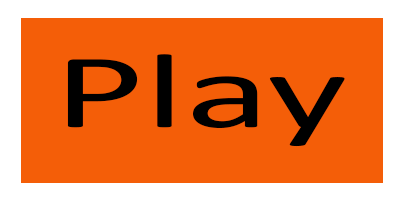
<style>
.page{position:relative;width:400px;height:200px;background:#f45e08}
.page>*{position:absolute;margin:0}
.t1{font:107.1px "Calibri";color:#000000;scale:1.66 1}
</style>
<div class="page">
<p class="t1" style="left:67px;top:54px;width:278px;height:93px">Play</p>
</div>
